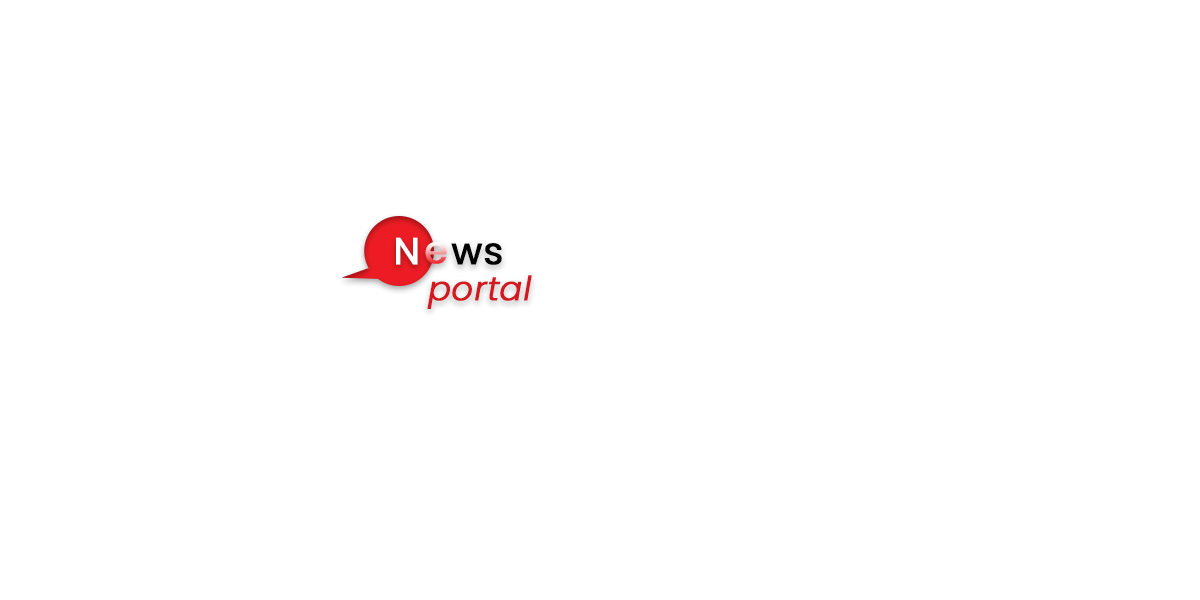
<style>
.page{position:relative;width:1200px;height:600px;background:#ffffff}
.page>*{position:absolute;margin:0}
.t1{font:37.5px "Poppins-Regular";color:#ffffff;font-weight:bold}
.t2{font:37.5px "Poppins-Regular";font-weight:bold}
.t3{font:37.5px "Poppins-Regular";color:#000000;font-weight:bold}
.t4{font:33.3px "Poppins-LightItalic";color:#d31920;font-weight:bold}
</style>
<div class="page">
<p class="t1" style="left:396px;top:237px;width:22px;height:28px">N</p>
<p class="t2" style="left:425px;top:242px;width:22px;height:22px">e</p>
<p class="t3" style="left:451px;top:243px;width:51px;height:22px">ws</p>
<p class="t4" style="left:427px;top:275px;width:105px;height:34px">portal</p>
</div>
